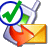
<style>
.page{position:relative;width:50px;height:48px;background:#ffffff}
.page>*{position:absolute;margin:0}
.t1{font:24px "DFPHaiBaoW12";color:#00a61b}
</style>
<div class="page">
<p class="t1" style="left:2px;top:0px;width:20px;height:23px">√</p>
</div>
